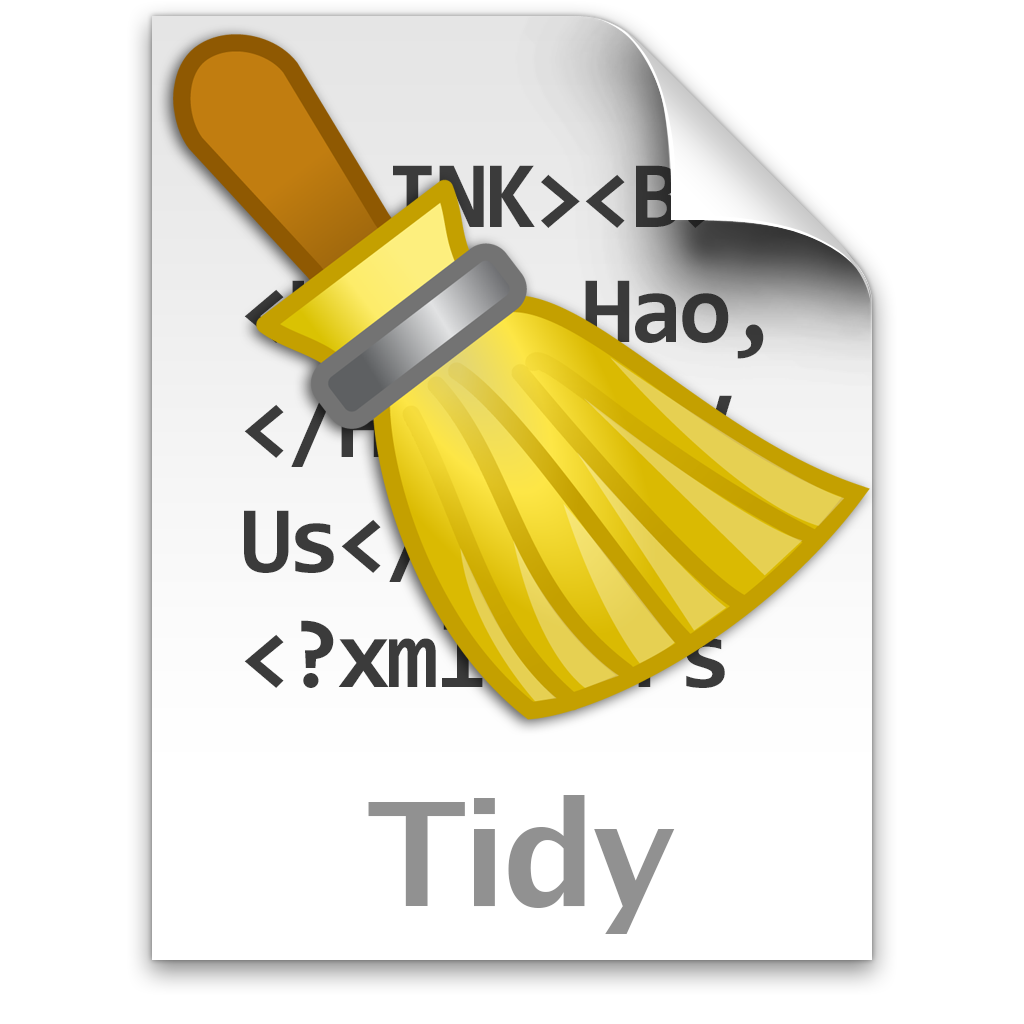
<style>
.page{position:relative;width:1024px;height:1024px;background:#ffffff}
.page>*{position:absolute;margin:0}
.t1{font:96px "Consolas-Bold";letter-spacing:-0.04em}
.t2{font:144px "LucidaGrande-Bold";letter-spacing:-0.04em;color:#919191}
</style>
<div class="page">
<p class="t1" style="left:244px;top:165px;width:520px;height:523px">&lt;BLINK&gt;&lt;B&gt;<br>&lt;H1&gt;Ni Hao,<br>&lt;/H2&gt;&lt;/DIV<br>Us&lt;/BLINK&gt;<br>&lt;?xml vers</p>
<p class="t2" style="left:368px;top:795px;width:307px;height:139px">Tidy</p>
</div>
